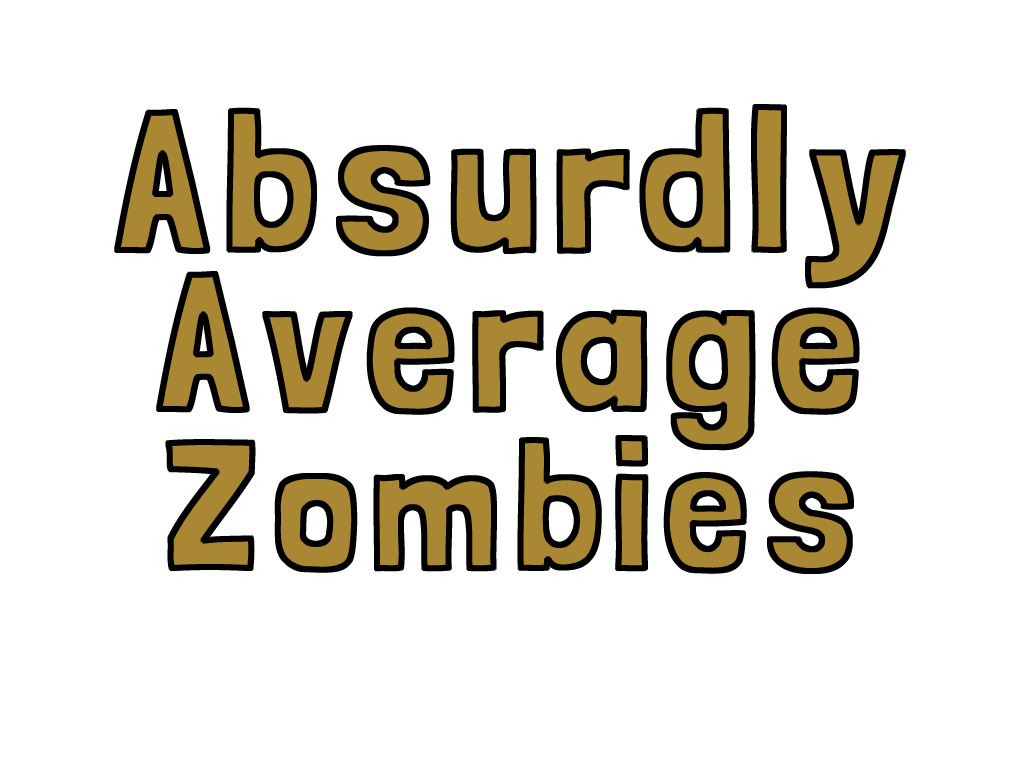
<style>
.page{position:relative;width:1024px;height:768px;background:#ffffff}
.page>*{position:absolute;margin:0}
.t1{font:196.1px/159px "LondrinaSolid-Regular";letter-spacing:0.06em;color:#aa8833;scale:1.06 1}
.t2{font:190.8px/159px "LondrinaSolid-Regular";letter-spacing:0.06em;color:#aa8833;scale:1.06 1}
.t3{font:180.2px/159px "LondrinaSolid-Regular";letter-spacing:0.06em;color:#aa8833;scale:1.06 1}
</style>
<div class="page">
<p class="t1" style="left:116px;top:107px;width:787px;height:464px;text-align:center">Absurdly<br><span class="t2">Average<br></span><span class="t3">Zombies</span></p>
</div>
